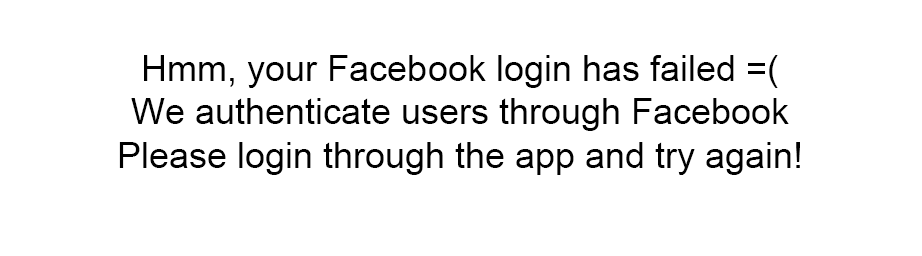
<style>
.page{position:relative;width:922px;height:256px;background:#ffffff}
.page>*{position:absolute;margin:0}
.t1{font:36px "ArialMT";color:#000000}
</style>
<div class="page">
<p class="t1" style="left:119px;top:55px;width:681px;height:120px;text-align:center">Hmm, your Facebook login has failed =(<br>We authenticate users through Facebook<br>Please login through the app and try again!</p>
</div>
